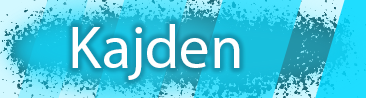
<style>
.page{position:relative;width:366px;height:98px}
.page>*{position:absolute;margin:0}
.t1{font:60.5px "MyriadPro-Regular";color:#ffffff}
</style>
<div class="page">
<p class="t1" style="left:72px;top:24px;width:168px;height:56px">Kajden</p>
</div>
